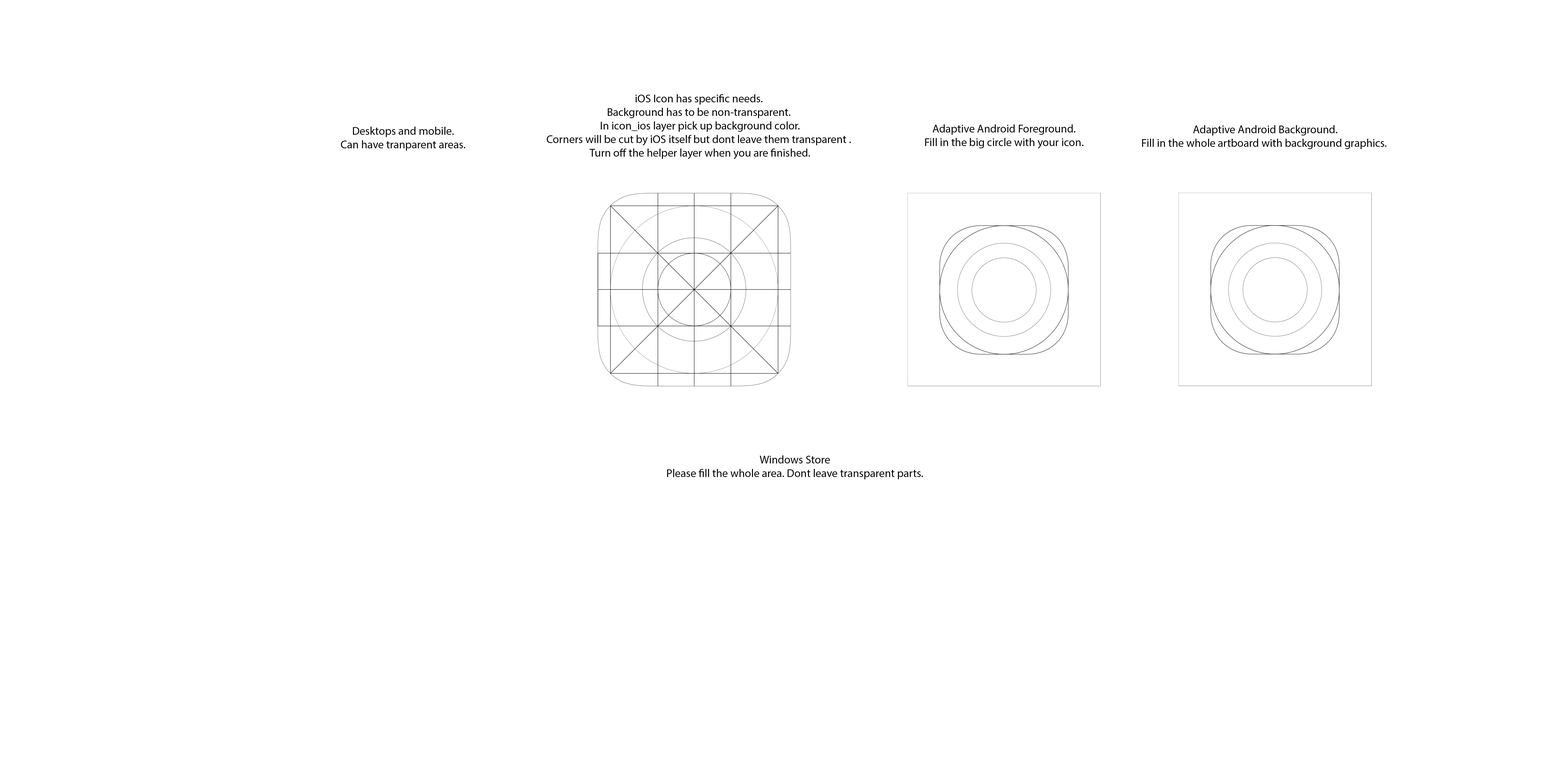
<style>
.page{position:relative;width:1544px;height:772px;background:#ffffff}
.page>*{position:absolute;margin:0}
.t1{font:11.3px "MyriadPro-Regular";color:#000000}
.t2{font:11.3px "MyriadPro-Regular";color:#010101}
</style>
<div class="page">
<p class="t1" style="left:547px;top:94px;width:304px;height:65px;text-align:center">iOS Icon has specific needs. <br>Background has to be non-transparent. <br>In icon_ios layer pick up background color.<br>Corners will be cut by iOS itself but dont leave them transparent . <br>Turn off the helper layer when you are finished.</p>
<p class="t1" style="left:925px;top:124px;width:159px;height:25px;text-align:center">Adaptive Android Foreground.<br>Fill in the big circle with your icon.</p>
<p class="t1" style="left:1142px;top:125px;width:245px;height:24px;text-align:center">Adaptive Android Background.<br>Fill in the whole artboard with background graphics.</p>
<p class="t1" style="left:341px;top:127px;width:124px;height:24px;text-align:center">Desktops and mobile.<br>Can have tranparent areas.</p>
<p class="t2" style="left:667px;top:455px;width:256px;height:24px;text-align:center">Windows Store<br>Please fill the whole area. Dont leave transparent parts.</p>
</div>
